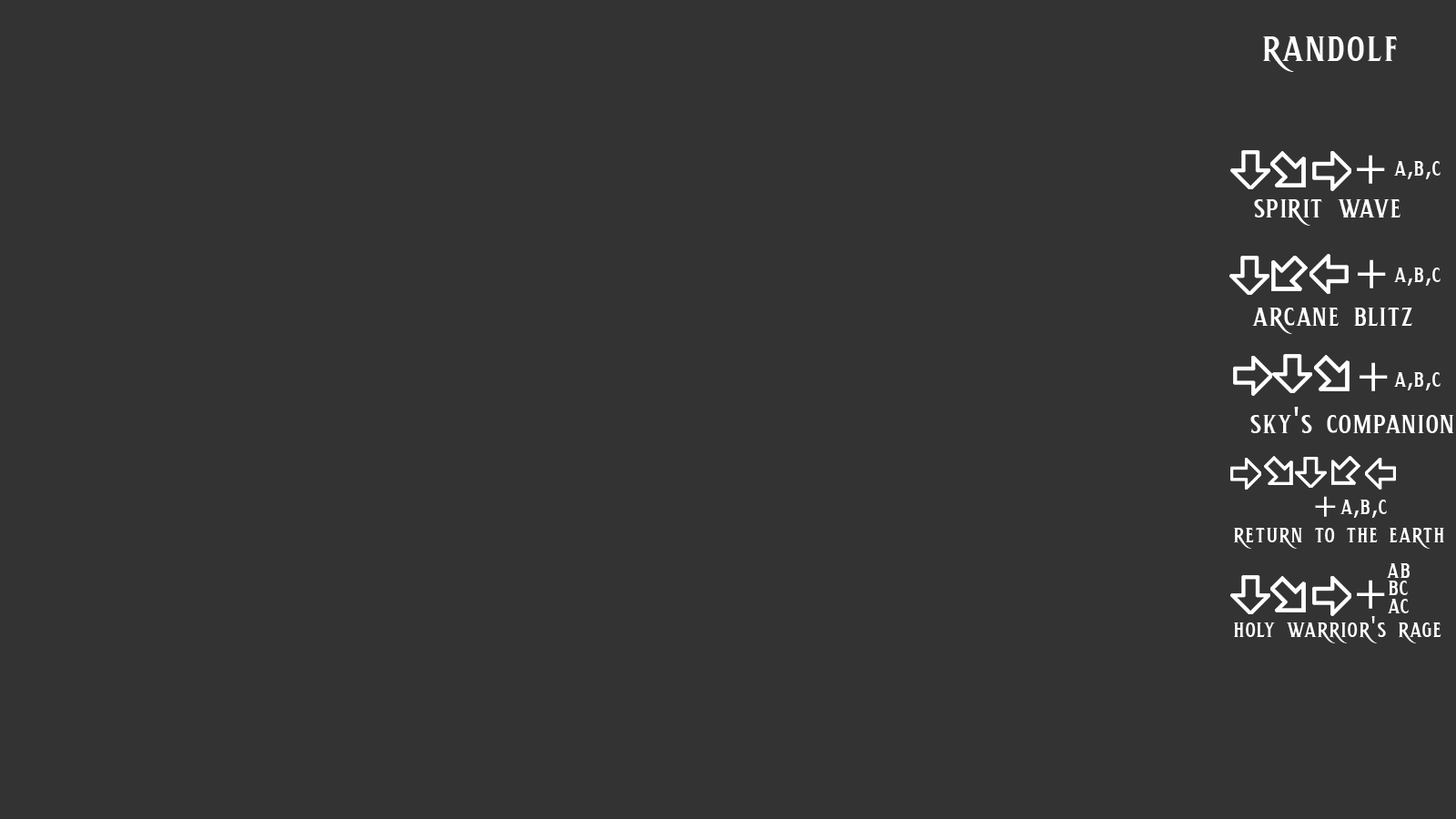
<style>
.page{position:relative;width:1456px;height:819px;background:#333333}
.page>*{position:absolute;margin:0}
.t1{font:53.1px "HemeraIIDEMO-Regular";color:#fffefe}
.t2{font:53.1px "MyriadPro-Regular";color:#ffffff}
.t3{font:30.3px "HemeraIIDEMO-Regular";color:#ffffff}
.t4{font:30.3px "MyriadPro-Regular";color:#ffffff}
.t5{font:37.9px "HemeraIIDEMO-Regular";color:#ffffff}
.t6{font:37.9px "MyriadPro-Regular";color:#ffffff}
</style>
<div class="page">
<p class="t1" style="left:1263px;top:36px;width:134px;height:36px">randolf</p>
<p class="t2" style="left:1357px;top:155px;width:28px;height:29px">+</p>
<p class="t3" style="left:1394px;top:161px;width:47px;height:18px">a<span class="t4">,</span>b<span class="t4">,</span>c</p>
<p class="t5" style="left:1254px;top:199px;width:146px;height:27px">spirit wave</p>
<p class="t2" style="left:1358px;top:259px;width:28px;height:29px">+</p>
<p class="t3" style="left:1394px;top:268px;width:47px;height:18px">a<span class="t4">,</span>b<span class="t4">,</span>c</p>
<p class="t5" style="left:1252px;top:308px;width:160px;height:26px">arcane blitz</p>
<p class="t2" style="left:1360px;top:362px;width:28px;height:29px">+</p>
<p class="t3" style="left:1394px;top:372px;width:47px;height:18px">a<span class="t4">,</span>b<span class="t4">,</span>c</p>
<p class="t5" style="left:1250px;top:407px;width:204px;height:26px">sky<span class="t6">'</span>s companion</p>
<p class="t6" style="left:1315px;top:496px;width:21px;height:21px">+</p>
<p class="t3" style="left:1340px;top:500px;width:47px;height:18px">a<span class="t4">,</span>b<span class="t4">,</span>c</p>
<p class="t3" style="left:1234px;top:528px;width:210px;height:21px">return to the earth</p>
<p class="t3" style="left:1387px;top:563px;width:23px;height:15px">ab</p>
<p class="t2" style="left:1357px;top:580px;width:28px;height:29px">+</p>
<p class="t3" style="left:1389px;top:581px;width:19px;height:14px">bc</p>
<p class="t3" style="left:1388px;top:599px;width:21px;height:14px">ac</p>
<p class="t3" style="left:1234px;top:616px;width:207px;height:27px">holy warrior<span class="t4">'</span>s rage</p>
</div>
